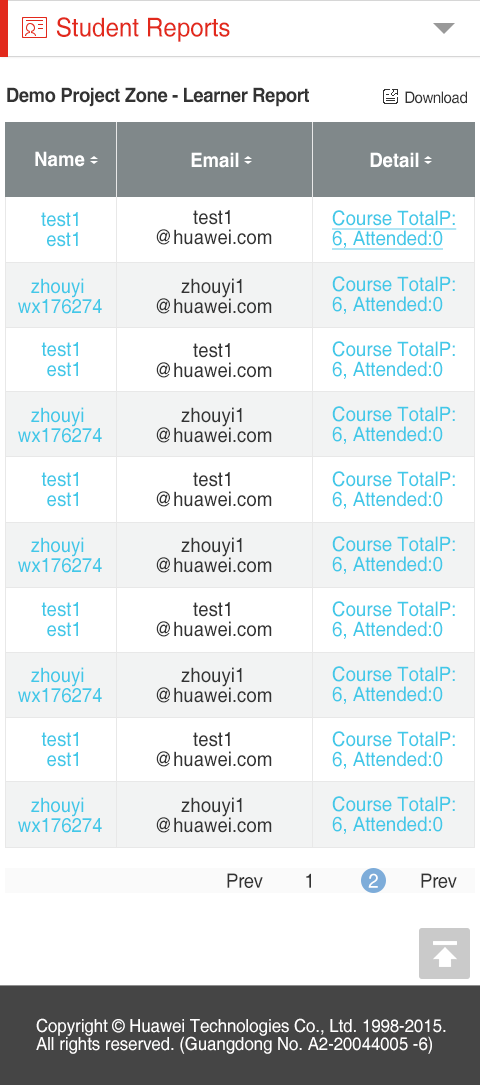
<style>
.page{position:relative;width:480px;height:1085px;background:#ffffff}
.page>*{position:absolute;margin:0}
.t1{font:26px "Helvetica";color:#e2291c;scale:0.93 1}
.t2{font:20px "Helvetica-Bold";letter-spacing:-0.025em;color:#333333;scale:0.93 1}
.t3{font:16px "Helvetica";letter-spacing:-0.025em;color:#333333;scale:0.93 1}
.t4{font:20px "Helvetica-Bold";color:#ffffff;scale:0.93 1}
.t5{font:20px/20px "Helvetica";color:#42c8e8;scale:0.93 1}
.t6{font:20px/20px "Helvetica";color:#333333;scale:0.93 1}
.t7{font:20px/20px "Helvetica";color:#42c8e8;text-decoration:underline;scale:0.93 1}
.t8{font:20px "Helvetica";letter-spacing:-0.025em;color:#333333;scale:0.93 1}
.t9{font:20px "Helvetica";letter-spacing:-0.025em;color:#ffffff;scale:0.93 1}
.t10{font:18px/18px "Helvetica";color:#fffefe;scale:0.93 1}
</style>
<div class="page">
<p class="t1" style="left:56px;top:17px;width:174px;height:25px">Student Reports</p>
<p class="t2" style="left:7px;top:87px;width:302px;height:20px">Demo Project Zone - Learner Report</p>
<p class="t3" style="left:405px;top:91px;width:62px;height:13px">Download</p>
<p class="t4" style="left:35px;top:151px;width:50px;height:16px">Name</p>
<p class="t4" style="left:191px;top:152px;width:48px;height:16px">Email</p>
<p class="t4" style="left:370px;top:152px;width:49px;height:16px">Detail</p>
<p class="t5" style="left:41px;top:212px;width:37px;height:35px;text-align:center">test1<br> est1</p>
<p class="t6" style="left:156px;top:210px;width:116px;height:35px;text-align:center">test1<br>@huawei.com</p>
<p class="t7" style="left:332px;top:210px;width:125px;height:40px">Course TotalP:<br>6, Attended:0</p>
<p class="t5" style="left:18px;top:278px;width:84px;height:36px;text-align:center">zhouyi <br>wx176274</p>
<p class="t6" style="left:156px;top:278px;width:116px;height:36px;text-align:center">zhouyi1<br>@huawei.com</p>
<p class="t5" style="left:332px;top:276px;width:123px;height:38px">Course TotalP:<br>6, Attended:0</p>
<p class="t5" style="left:41px;top:342px;width:37px;height:35px;text-align:center">test1 <br>est1</p>
<p class="t5" style="left:332px;top:341px;width:123px;height:38px">Course TotalP:<br>6, Attended:0</p>
<p class="t6" style="left:156px;top:343px;width:116px;height:35px;text-align:center">test1<br>@huawei.com</p>
<p class="t5" style="left:18px;top:407px;width:84px;height:36px;text-align:center">zhouyi <br>wx176274</p>
<p class="t6" style="left:156px;top:407px;width:116px;height:36px;text-align:center">zhouyi1<br>@huawei.com</p>
<p class="t5" style="left:332px;top:406px;width:123px;height:38px">Course TotalP:<br>6, Attended:0</p>
<p class="t5" style="left:41px;top:472px;width:37px;height:35px;text-align:center">test1 <br>est1</p>
<p class="t6" style="left:156px;top:472px;width:116px;height:35px;text-align:center">test1<br>@huawei.com</p>
<p class="t5" style="left:332px;top:471px;width:123px;height:38px">Course TotalP:<br>6, Attended:0</p>
<p class="t5" style="left:18px;top:537px;width:84px;height:36px;text-align:center">zhouyi <br>wx176274</p>
<p class="t6" style="left:156px;top:537px;width:116px;height:36px;text-align:center">zhouyi1<br>@huawei.com</p>
<p class="t5" style="left:332px;top:536px;width:123px;height:38px">Course TotalP:<br>6, Attended:0</p>
<p class="t5" style="left:41px;top:602px;width:37px;height:35px;text-align:center">test1 <br>est1</p>
<p class="t6" style="left:156px;top:602px;width:116px;height:35px;text-align:center">test1<br>@huawei.com</p>
<p class="t5" style="left:332px;top:601px;width:123px;height:38px">Course TotalP:<br>6, Attended:0</p>
<p class="t5" style="left:18px;top:667px;width:84px;height:36px;text-align:center">zhouyi <br>wx176274</p>
<p class="t6" style="left:156px;top:667px;width:116px;height:36px;text-align:center">zhouyi1<br>@huawei.com</p>
<p class="t5" style="left:332px;top:666px;width:123px;height:38px">Course TotalP:<br>6, Attended:0</p>
<p class="t5" style="left:41px;top:732px;width:37px;height:35px;text-align:center">test1 <br>est1</p>
<p class="t6" style="left:156px;top:732px;width:116px;height:35px;text-align:center">test1<br>@huawei.com</p>
<p class="t5" style="left:332px;top:731px;width:123px;height:38px">Course TotalP:<br>6, Attended:0</p>
<p class="t5" style="left:18px;top:797px;width:84px;height:36px;text-align:center">zhouyi <br>wx176274</p>
<p class="t6" style="left:156px;top:797px;width:116px;height:36px;text-align:center">zhouyi1<br>@huawei.com</p>
<p class="t5" style="left:332px;top:796px;width:123px;height:38px">Course TotalP:<br>6, Attended:0</p>
<p class="t8" style="left:227px;top:873px;width:36px;height:15px">Prev</p>
<p class="t8" style="left:306px;top:873px;width:5px;height:15px">1</p>
<p class="t9" style="left:368px;top:873px;width:10px;height:15px">2</p>
<p class="t8" style="left:421px;top:873px;width:36px;height:15px">Prev</p>
<p class="t10" style="left:36px;top:1018px;width:410px;height:36px">Copyright © Huawei Technologies Co., Ltd. 1998-2015. <br>All rights reserved. (Guangdong No. A2-20044005 -6)</p>
</div>
